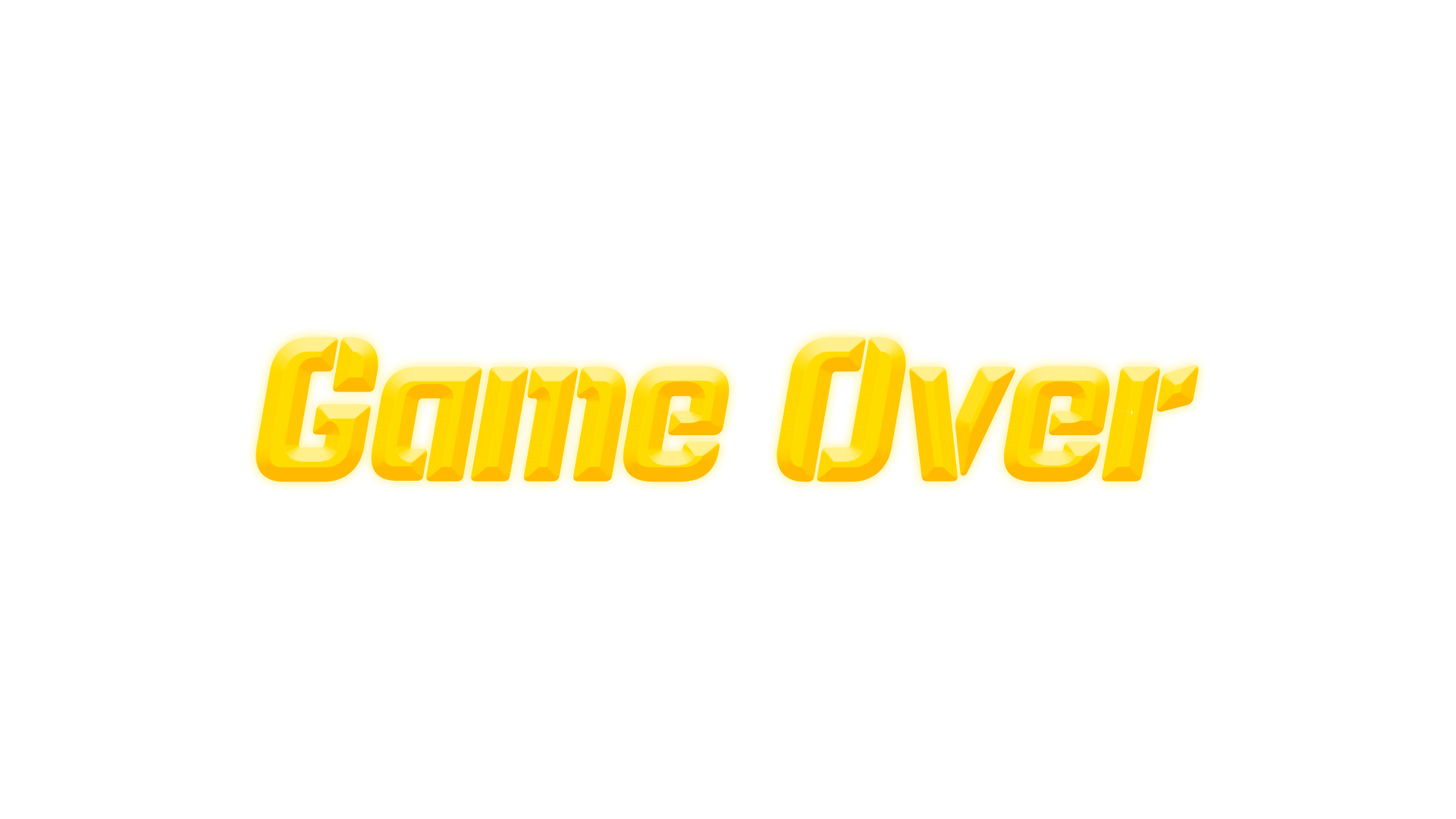
<style>
.page{position:relative;width:1456px;height:819px;background:#ffffff}
.page>*{position:absolute;margin:0}
.t1{font:163.8px "SDComicStencil-aBasic";letter-spacing:-0.03em;color:#ffdc00;font-weight:bold;font-style:italic}
</style>
<div class="page">
<p class="t1" style="left:256px;top:337px;width:943px;height:145px">Game Over</p>
</div>
